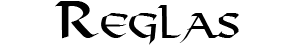
<style>
.page{position:relative;width:293px;height:46px;background:#ffffff}
.page>*{position:absolute;margin:0}
.t1{font:48px "Viking-Medium";color:#000000;font-variant:small-caps}
</style>
<div class="page">
<p class="t1" style="left:55px;top:1px;width:184px;height:44px">Reglas</p>
</div>
